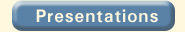
<style>
.page{position:relative;width:185px;height:32px;background:#5982a6}
.page>*{position:absolute;margin:0}
.t1{font:18px "Univers-Bold";letter-spacing:0.05em;color:#fff8de}
</style>
<div class="page">
<p class="t1" style="left:36px;top:9px;width:122px;height:14px">Presentations</p>
</div>
